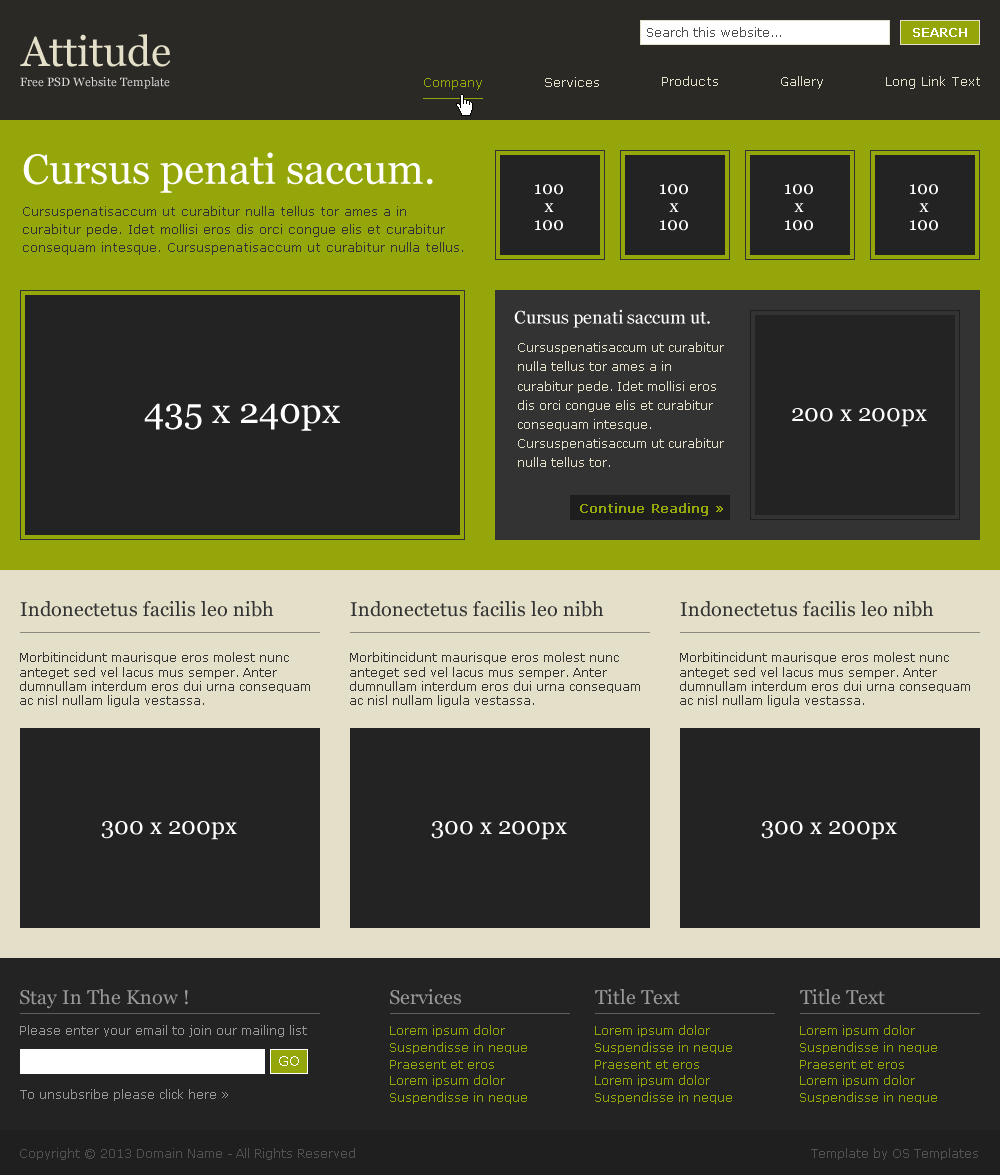
<style>
.page{position:relative;width:1000px;height:1175px;background:#232323}
.page>*{position:absolute;margin:0}
.t1{font:12px "Verdana";color:#4c4c4c}
.t2{font:12px "Verdana";color:#ffffff;font-weight:bold}
.t3{font:42px "Georgia";color:#e4dfc8}
.t4{font:12px "Georgia";color:#dadada}
.t5{font:13px "Verdana";color:#95a60a}
.t6{font:13px "Verdana";color:#e4dfc8}
.t7{font:42px "Georgia";color:#ffffff}
.t8{font:18px/18px "Georgia";color:#ffffff}
.t9{font:13px/18.2px "Verdana";color:#333333}
.t10{font:18px "Georgia";color:#ffffff}
.t11{font:12px/19.2px "Verdana";color:#e4dfc8}
.t12{font:36px "Georgia";color:#ffffff}
.t13{font:24px "Georgia";color:#ffffff}
.t14{font:13px "Verdana";color:#95a60a;font-weight:bold}
.t15{font:20px "Georgia";color:#333333}
.t16{font:12px/14.4px "Verdana";color:#333333}
.t17{font:20px "Georgia";color:#98989a}
.t18{font:20px "Georgia";color:#999999}
.t19{font:12px "Verdana";color:#98989a}
.t20{font:12px/16.8px "Verdana";color:#95a60a}
.t21{font:14px "Verdana";color:#ffffff}
.t22{font:12px "Verdana";color:#525252}
</style>
<div class="page">
<p class="t1" style="left:647px;top:27px;width:134px;height:10px">Search this website...</p>
<p class="t2" style="left:913px;top:28px;width:54px;height:9px">SEARCH</p>
<p class="t3" style="left:20px;top:34px;width:151px;height:33px">Attitude</p>
<p class="t4" style="left:20px;top:77px;width:150px;height:12px">Free PSD Website Template</p>
<p class="t5" style="left:424px;top:78px;width:58px;height:12px">Company</p>
<p class="t6" style="left:545px;top:77px;width:54px;height:10px">Services</p>
<p class="t6" style="left:662px;top:76px;width:56px;height:10px">Products</p>
<p class="t6" style="left:781px;top:76px;width:42px;height:13px">Gallery</p>
<p class="t6" style="left:886px;top:76px;width:94px;height:13px">Long Link Text</p>
<p class="t7" style="left:23px;top:152px;width:410px;height:41px">Cursus penati saccum.</p>
<p class="t8" style="left:535px;top:184px;width:28px;height:47px;text-align:center">100<br>x<br>100</p>
<p class="t8" style="left:660px;top:184px;width:28px;height:47px;text-align:center">100<br>x<br>100</p>
<p class="t8" style="left:785px;top:184px;width:28px;height:47px;text-align:center">100<br>x<br>100</p>
<p class="t8" style="left:910px;top:184px;width:28px;height:47px;text-align:center">100<br>x<br>100</p>
<p class="t9" style="left:23px;top:206px;width:440px;height:49px">Cursuspenatisaccum ut curabitur nulla tellus tor ames a in curabitur pede. Idet mollisi eros dis orci congue elis et curabitur consequam intesque. Cursuspenatisaccum ut curabitur nulla tellus.</p>
<p class="t10" style="left:514px;top:309px;width:196px;height:19px">Cursus penati saccum ut.</p>
<p class="t11" style="left:518px;top:342px;width:206px;height:125px">Cursuspenatisaccum ut curabitur nulla tellus tor ames a in curabitur pede. Idet mollisi eros dis orci congue elis et curabitur consequam intesque. Cursuspenatisaccum ut curabitur nulla tellus tor.</p>
<p class="t12" style="left:144px;top:403px;width:196px;height:28px">435 x 240px</p>
<p class="t13" style="left:792px;top:408px;width:135px;height:19px">200 x 200px</p>
<p class="t14" style="left:580px;top:503px;width:143px;height:13px">Continue Reading »</p>
<p class="t15" style="left:20px;top:601px;width:254px;height:16px">Indonectetus facilis leo nibh</p>
<p class="t15" style="left:350px;top:601px;width:254px;height:16px">Indonectetus facilis leo nibh</p>
<p class="t15" style="left:680px;top:601px;width:254px;height:16px">Indonectetus facilis leo nibh</p>
<p class="t16" style="left:20px;top:652px;width:290px;height:55px">Morbitincidunt maurisque eros molest nunc anteget sed vel lacus mus semper. Anter dumnullam interdum eros dui urna consequam ac nisl nullam ligula vestassa.</p>
<p class="t16" style="left:350px;top:652px;width:290px;height:55px">Morbitincidunt maurisque eros molest nunc anteget sed vel lacus mus semper. Anter dumnullam interdum eros dui urna consequam ac nisl nullam ligula vestassa.</p>
<p class="t16" style="left:680px;top:652px;width:290px;height:55px">Morbitincidunt maurisque eros molest nunc anteget sed vel lacus mus semper. Anter dumnullam interdum eros dui urna consequam ac nisl nullam ligula vestassa.</p>
<p class="t13" style="left:101px;top:821px;width:136px;height:19px">300 x 200px</p>
<p class="t13" style="left:431px;top:821px;width:136px;height:19px">300 x 200px</p>
<p class="t13" style="left:761px;top:821px;width:136px;height:19px">300 x 200px</p>
<p class="t17" style="left:20px;top:989px;width:168px;height:20px">Stay In The Know !</p>
<p class="t18" style="left:390px;top:989px;width:71px;height:16px">Services</p>
<p class="t18" style="left:595px;top:989px;width:85px;height:16px">Title Text</p>
<p class="t18" style="left:800px;top:989px;width:85px;height:16px">Title Text</p>
<p class="t19" style="left:20px;top:1025px;width:287px;height:12px">Please enter your email to join our mailing list</p>
<p class="t20" style="left:390px;top:1025px;width:137px;height:79px">Lorem ipsum dolor<br>Suspendisse in neque<br>Praesent et eros<br>Lorem ipsum dolor<br>Suspendisse in neque</p>
<p class="t20" style="left:595px;top:1025px;width:137px;height:79px">Lorem ipsum dolor<br>Suspendisse in neque<br>Praesent et eros<br>Lorem ipsum dolor<br>Suspendisse in neque</p>
<p class="t20" style="left:800px;top:1025px;width:137px;height:79px">Lorem ipsum dolor<br>Suspendisse in neque<br>Praesent et eros<br>Lorem ipsum dolor<br>Suspendisse in neque</p>
<p class="t21" style="left:279px;top:1056px;width:20px;height:10px">GO</p>
<p class="t19" style="left:20px;top:1089px;width:208px;height:12px">To unsubsribe please click here »</p>
<p class="t22" style="left:20px;top:1148px;width:335px;height:12px">Copyright © 2013 Domain Name - All Rights Reserved</p>
<p class="t22" style="left:811px;top:1148px;width:167px;height:12px">Template by OS Templates</p>
</div>
